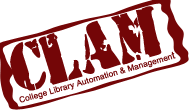
<style>
.page{position:relative;width:191px;height:111px;background:#ffffff}
.page>*{position:absolute;margin:0}
.t1{font:60px "4YEOstamp";color:#740607;font-weight:bold}
.t2{font:8px "ArialMT";color:#740607;font-weight:bold}
.t3{font:10px "ArialMT";color:#740607;font-weight:bold}
</style>
<div class="page">
<p class="t1" style="left:10px;top:6px;width:152px;height:85px;rotate:-16deg">CLAM</p>
<p class="t2" style="left:19px;top:51px;width:157px;height:52px;rotate:-16deg">College Library Automation &amp; Managemen<span class="t3">t</span></p>
</div>
